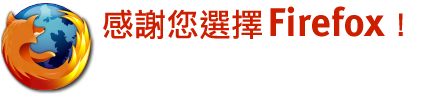
<style>
.page{position:relative;width:422px;height:95px;background:#ffffff}
.page>*{position:absolute;margin:0}
.t1{font:40px "MetaBold-Roman";letter-spacing:0.01em;color:#cd1e00}
.t2{font:32px "DFLiHeiStd-W5";letter-spacing:0.01em;color:#cd1e00}
</style>
<div class="page">
<p class="t1" style="left:103px;top:6px;width:300px;height:34px"><span class="t2">感謝您選擇 </span>Firefox<span class="t2">！</span></p>
</div>
